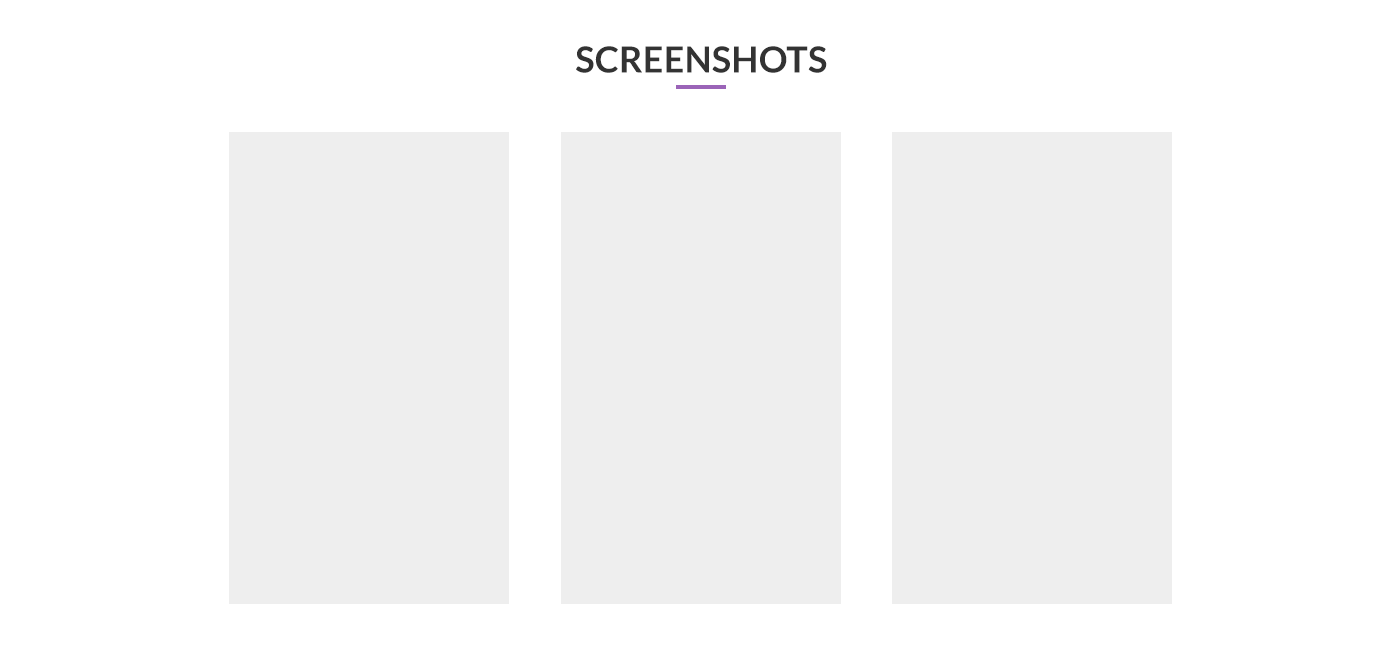
<style>
.page{position:relative;width:1400px;height:650px;background:#ffffff}
.page>*{position:absolute;margin:0}
.t1{font:36px "Lato-Bold";letter-spacing:0.005em;color:#333333}
</style>
<div class="page">
<p class="t1" style="left:576px;top:46px;width:251px;height:27px">SCREENSHOTS</p>
</div>
